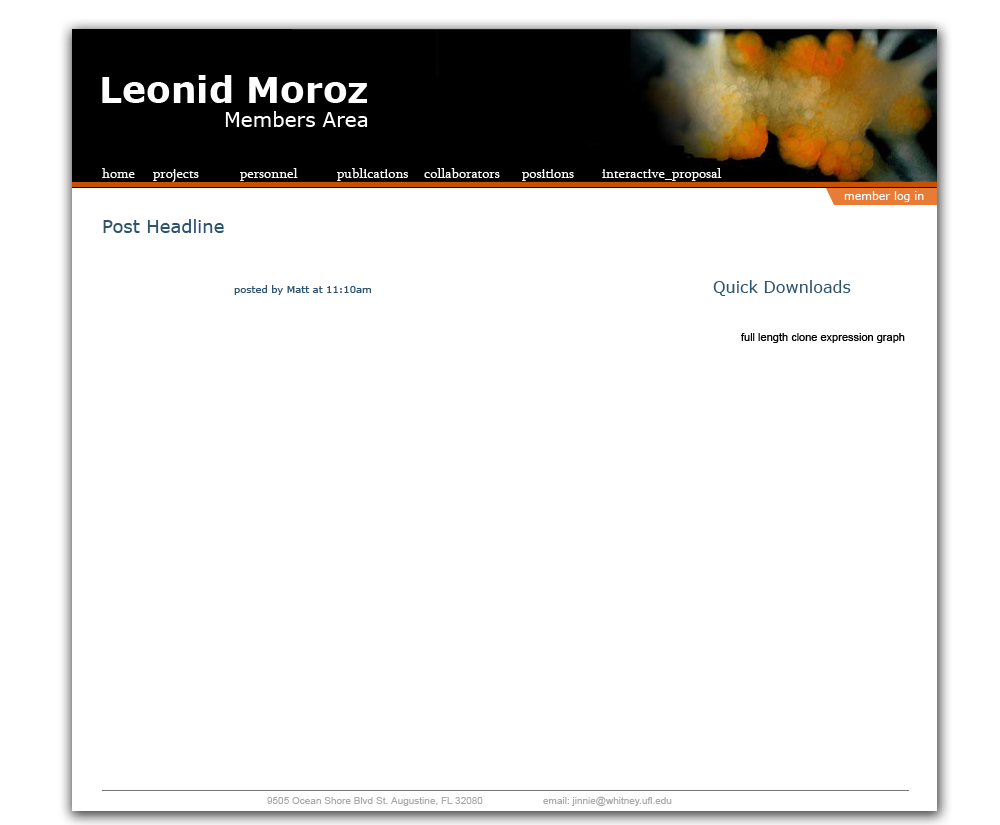
<style>
.page{position:relative;width:1000px;height:825px;background:#ffffff}
.page>*{position:absolute;margin:0}
.t1{font:36px "Verdana-Bold";color:#ffffff}
.t2{font:20px "Verdana";color:#ffffff}
.t3{font:14px "Sylfaen";color:#ffffff}
.t4{font:11px "Verdana";color:#ffffff}
.t5{font:18px "Verdana";color:#2d536e}
.t6{font:16px "Verdana";color:#2d536e}
.t7{font:10px "Verdana";color:#2d536e}
.t8{font:11px "ArialMT";color:#000000}
.t9{font:10px "ArialMT";color:#aaaaaa}
</style>
<div class="page">
<p class="t1" style="left:102px;top:75px;width:265px;height:28px">Leonid Moroz</p>
<p class="t2" style="left:225px;top:111px;width:143px;height:16px">Members Area</p>
<p class="t3" style="left:102px;top:168px;width:33px;height:10px">home</p>
<p class="t3" style="left:153px;top:169px;width:46px;height:13px">projects</p>
<p class="t3" style="left:240px;top:168px;width:58px;height:13px">personnel</p>
<p class="t3" style="left:337px;top:168px;width:71px;height:13px">publications</p>
<p class="t3" style="left:424px;top:168px;width:76px;height:10px">collaborators</p>
<p class="t3" style="left:522px;top:169px;width:52px;height:12px">positions</p>
<p class="t3" style="left:602px;top:168px;width:120px;height:13px">interactive_proposal</p>
<p class="t4" style="left:844px;top:191px;width:80px;height:11px">member log in</p>
<p class="t5" style="left:103px;top:219px;width:121px;height:14px">Post Headline</p>
<p class="t6" style="left:713px;top:280px;width:138px;height:16px">Quick Downloads</p>
<p class="t7" style="left:234px;top:285px;width:137px;height:10px">posted by Matt at 11:10am</p>
<p class="t8" style="left:741px;top:333px;width:164px;height:10px">full length clone expression graph</p>
<p class="t9" style="left:267px;top:797px;width:216px;height:9px">9505 Ocean Shore Blvd St. Augustine, FL 32080</p>
<p class="t9" style="left:543px;top:796px;width:129px;height:11px">email: jinnie@whitney.ufl.edu</p>
</div>
